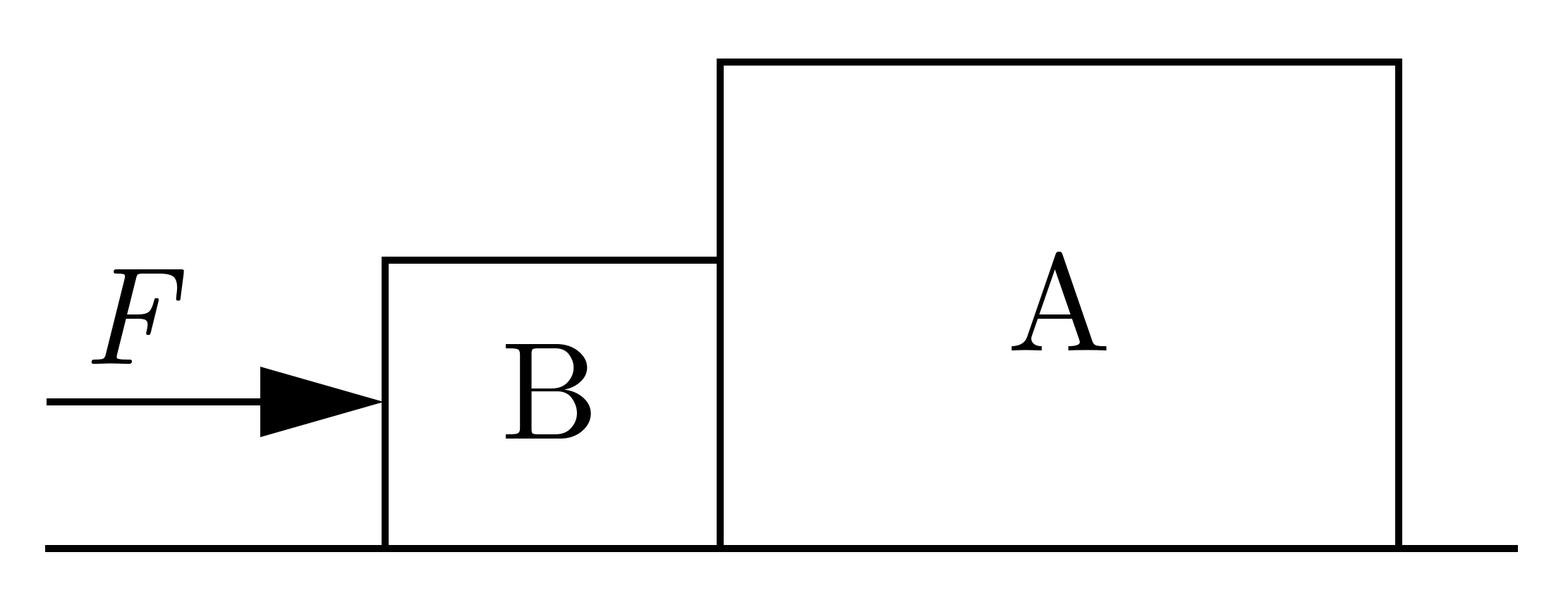
<style>
.page{position:relative;width:1568px;height:612px;background:#ffffff}
.page>*{position:absolute;margin:0}
.t1{font:138.2px "CMUSerif-Roman";color:#000000}
.t2{font:138.2px "CMUSerif-Italic";color:#000000}
</style>
<div class="page">
<p class="t1" style="left:1011px;top:252px;width:96px;height:99px">A</p>
<p class="t2" style="left:91px;top:269px;width:93px;height:95px">F</p>
<p class="t1" style="left:506px;top:344px;width:85px;height:95px">B</p>
</div>
